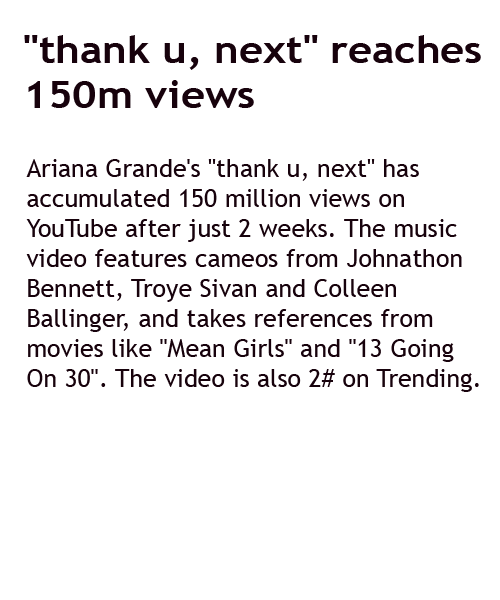
<style>
.page{position:relative;width:500px;height:600px;background:#ffffff}
.page>*{position:absolute;margin:0}
.t1{font:37.5px "TrebuchetMS-Bold";color:#17020c;scale:1.11 1}
.t2{font:25px "TrebuchetMS";color:#17020c}
</style>
<div class="page">
<p class="t1" style="left:24px;top:35px;width:457px;height:73px">"thank u, next" reaches<br>150m views</p>
<p class="t2" style="left:26px;top:159px;width:453px;height:233px">Ariana Grande's "thank u, next" has <br>accumulated 150 million views on <br>YouTube after just 2 weeks. The music <br>video features cameos from Johnathon <br>Bennett, Troye Sivan and Colleen <br>Ballinger, and takes references from <br>movies like "Mean Girls" and "13 Going <br>On 30". The video is also 2# on Trending.</p>
</div>
